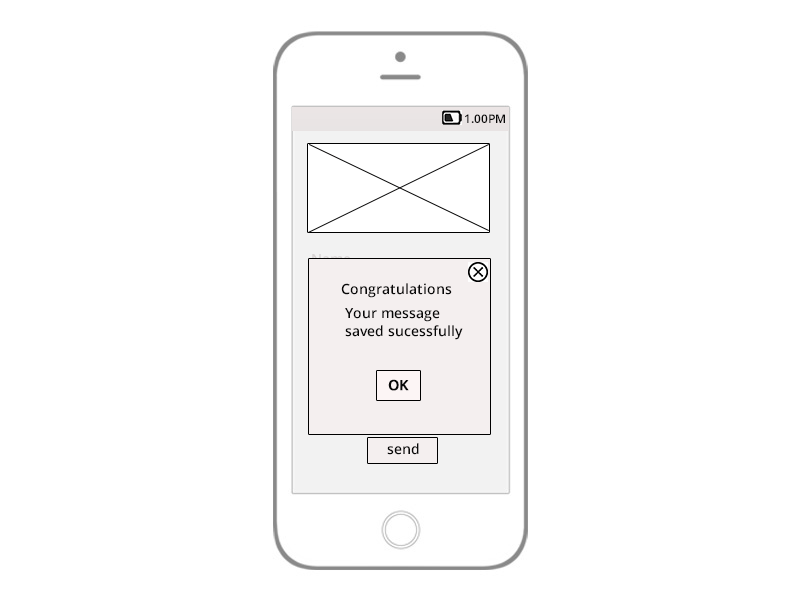
<style>
.page{position:relative;width:800px;height:600px;background:#ffffff}
.page>*{position:absolute;margin:0}
.t1{font:12px "OpenSans-Semibold";color:#090909}
.t2{font:14px/6px "OpenSans-Semibold";color:#090909}
.t3{font:14px "OpenSans-Semibold";color:#090909;font-weight:bold}
.t4{font:14px "OpenSans-Semibold";color:#090909}
.t5{font:18px "OpenSans-Semibold";color:#090909}
</style>
<div class="page">
<p class="t1" style="left:465px;top:114px;width:40px;height:9px">1.00PM</p>
<p class="t2" style="left:341px;top:283px;width:122px;height:57px">Congratulations<br>    <br><br><br>         Your message <br><br>     <br>         saved sucessfully</p>
<p class="t3" style="left:388px;top:379px;width:21px;height:12px"><span class="t4"><br>  </span>OK</p>
<p class="t4" style="left:387px;top:443px;width:32px;height:12px"><span class="t5">    </span>send</p>
</div>
